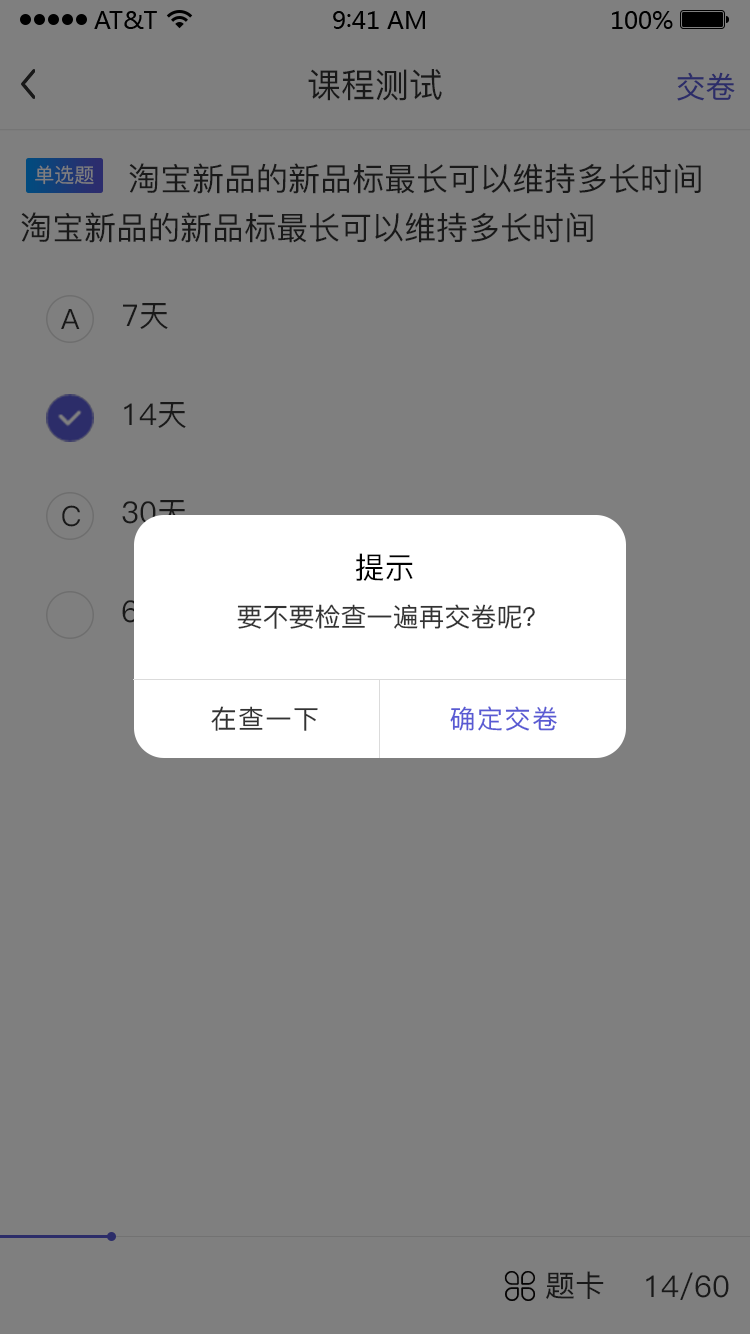
<style>
.page{position:relative;width:750px;height:1334px;background:#7f7f7f}
.page>*{position:absolute;margin:0}
.t1{font:34px "PingFang-SC-Medium";color:#191919}
.t2{font:30px "SourceHanSansCN-Regular";color:#2c2d69}
.t3{font:20px "PingFang-SC-Medium";color:#7f7f7f}
.t4{font:32px "PingFang-SC-Medium";color:#191919}
.t5{font:30px "PingFang-SC-Medium";color:#191919}
.t6{font:28px "PingFang-SC-Medium";color:#191919}
.t7{font:30px "PingFang-SC-Medium";color:#000000}
.t8{font:26px "PingFang-SC-Medium";color:#333333}
.t9{font:26px "PingFang-SC-Medium";letter-spacing:0.06em;color:#333333}
.t10{font:26px "PingFang-SC-Medium";letter-spacing:0.06em;color:#595ad3}
</style>
<div class="page">
<p class="t1" style="left:308px;top:69px;width:134px;height:32px">课程测试</p>
<p class="t2" style="left:677px;top:72px;width:58px;height:29px">交卷</p>
<p class="t3" style="left:35px;top:165px;width:59px;height:20px">单选题</p>
<p class="t4" style="left:129px;top:163px;width:572px;height:31px">淘宝新品的新品标最长可以维持多长时间</p>
<p class="t4" style="left:21px;top:212px;width:572px;height:31px">淘宝新品的新品标最长可以维持多长时间</p>
<p class="t5" style="left:123px;top:303px;width:45px;height:26px">7天</p>
<p class="t6" style="left:61px;top:309px;width:19px;height:20px">A</p>
<p class="t5" style="left:124px;top:402px;width:62px;height:26px">14天</p>
<p class="t6" style="left:62px;top:505px;width:19px;height:22px">C</p>
<p class="t5" style="left:122px;top:500px;width:64px;height:26px">30天</p>
<p class="t7" style="left:355px;top:553px;width:58px;height:28px">提示</p>
<p class="t8" style="left:237px;top:604px;width:298px;height:25px">要不要检查一遍再交卷呢？</p>
<p class="t9" style="left:211px;top:706px;width:107px;height:25px">在查一下</p>
<p class="t10" style="left:450px;top:706px;width:107px;height:25px">确定交卷</p>
<p class="t5" style="left:546px;top:1271px;width:58px;height:28px">题卡</p>
<p class="t5" style="left:646px;top:1272px;width:83px;height:28px">14/60</p>
</div>
